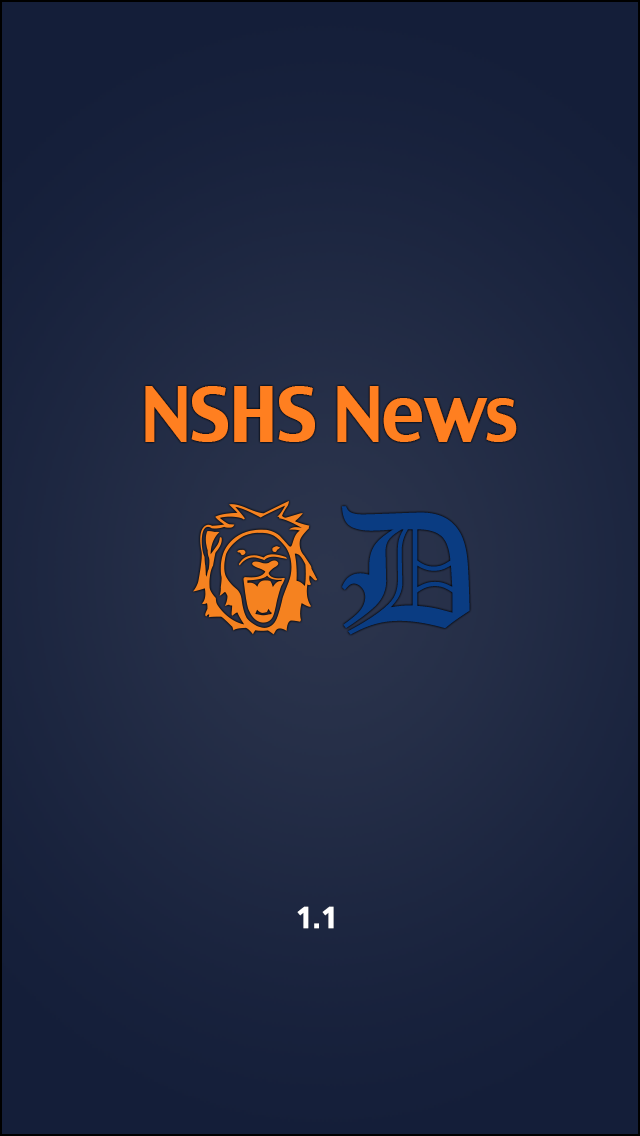
<style>
.page{position:relative;width:640px;height:1136px}
.page>*{position:absolute;margin:0}
.t1{font:72.9px "CharcoalCY";letter-spacing:-0.02em;color:#ff7f20}
.t2{font:167.6px "OldEnglishTextMT";color:#0a3c82}
.t3{font:28.2px "CharcoalCY";color:#ffffff}
</style>
<div class="page">
<p class="t1" style="left:145px;top:386px;width:372px;height:56px">NSHS News</p>
<p class="t2" style="left:342px;top:506px;width:128px;height:129px">D</p>
<p class="t3" style="left:297px;top:906px;width:37px;height:23px">1.1</p>
</div>
